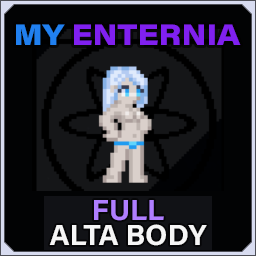
<style>
.page{position:relative;width:256px;height:256px;background:#020304}
.page>*{position:absolute;margin:0}
.t1{font:29.2px "AcuminConcept_760.000wght_112.000wdth";color:#8020f0}
.t2{font:29.2px "AcuminConcept_760.000wght_112.000wdth";color:#2080f0}
.t3{font:29.2px/25px "AcuminConcept-Bold";color:#f6f6f6}
.t4{font:29.2px/25px "AcuminConcept-Bold";color:#af7eff}
</style>
<div class="page">
<p class="t1" style="left:16px;top:24px;width:225px;height:21px"><span class="t2">MY </span>ENTERNIA</p>
<p class="t3" style="left:49px;top:200px;width:158px;height:46px;text-align:center"><span class="t4">FULL<br></span>ALTA BODY</p>
</div>
